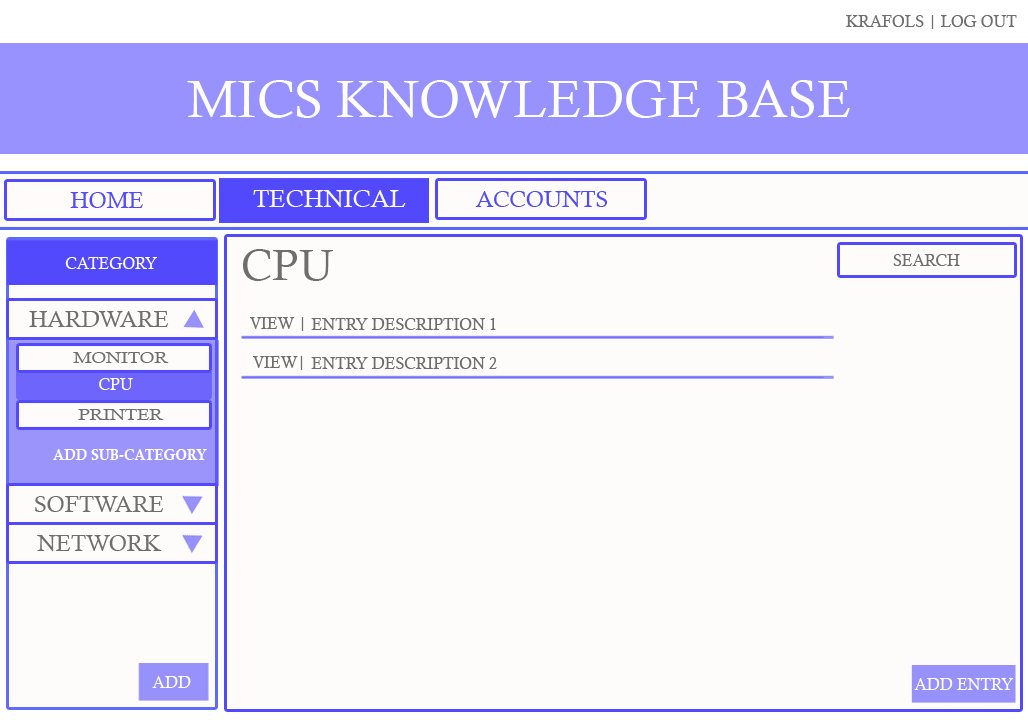
<style>
.page{position:relative;width:1028px;height:720px;background:#fdfcfa}
.page>*{position:absolute;margin:0}
.t1{font:16px "CalistoMT";color:#6e6e6f}
.t2{font:52.3px "CalistoMT";color:#fefeff}
.t3{font:22.8px "CalistoMT";color:#5249fc}
.t4{font:24.8px "CalistoMT";color:#fdfcf9}
.t5{font:16px "CalistoMT";color:#fdfcf9}
.t6{font:43.4px "CalistoMT";color:#6e6e6f}
.t7{font:22.8px "CalistoMT";color:#6e6e6f}
.t8{font:15.2px "CalistoMT";color:#6e6e6f;scale:1.22 1}
.t9{font:14.8px "CalisMTBol";color:#fdfcf9;scale:0.95 1}
</style>
<div class="page">
<p class="t1" style="left:846px;top:15px;width:171px;height:14px">KRAFOLS | LOG OUT</p>
<p class="t2" style="left:187px;top:80px;width:663px;height:38px">MICS KNOWLEDGE BASE</p>
<p class="t3" style="left:70px;top:192px;width:73px;height:16px">HOME</p>
<p class="t4" style="left:253px;top:190px;width:153px;height:18px">TECHNICAL</p>
<p class="t3" style="left:475px;top:191px;width:133px;height:17px">ACCOUNTS</p>
<p class="t5" style="left:65px;top:257px;width:92px;height:12px">CATEGORY</p>
<p class="t6" style="left:243px;top:249px;width:90px;height:32px">CPU</p>
<p class="t1" style="left:893px;top:254px;width:67px;height:12px">SEARCH</p>
<p class="t7" style="left:29px;top:311px;width:140px;height:16px">HARDWARE</p>
<p class="t1" style="left:250px;top:317px;width:54px;height:14px">VIEW |</p>
<p class="t1" style="left:311px;top:318px;width:185px;height:12px">ENTRY DESCRIPTION 1</p>
<p class="t8" style="left:73px;top:352px;width:96px;height:11px">MONITOR</p>
<p class="t1" style="left:253px;top:356px;width:50px;height:14px">VIEW|</p>
<p class="t1" style="left:311px;top:357px;width:186px;height:12px">ENTRY DESCRIPTION 2</p>
<p class="t5" style="left:99px;top:378px;width:34px;height:12px">CPU</p>
<p class="t8" style="left:78px;top:409px;width:86px;height:11px">PRINTER</p>
<p class="t9" style="left:53px;top:449px;width:154px;height:11px">ADD SUB-CATEGORY</p>
<p class="t7" style="left:35px;top:496px;width:129px;height:16px">SOFTWARE</p>
<p class="t7" style="left:37px;top:535px;width:125px;height:17px">NETWORK</p>
<p class="t5" style="left:152px;top:676px;width:39px;height:12px">ADD</p>
<p class="t5" style="left:914px;top:678px;width:100px;height:12px">ADD ENTRY</p>
</div>
